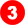
<style>
.page{position:relative;width:25px;height:25px;background:#ff0000}
.page>*{position:absolute;margin:0}
.t1{font:17.9px "Arial-Black";color:#ffffff;scale:0.91 1}
</style>
<div class="page">
<p class="t1" style="left:7px;top:6px;width:11px;height:14px">3</p>
</div>
